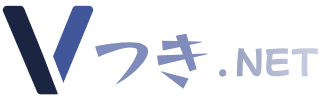
<style>
.page{position:relative;width:320px;height:100px;background:#ffffff}
.page>*{position:absolute;margin:0}
.t1{font:60px "ReggaeOne-Regular";color:#808cbc}
.t2{font:32px "MochiyPopOne-Regular";color:#b0b8cf}
</style>
<div class="page">
<p class="t1" style="left:95px;top:33px;width:113px;height:56px">つき</p>
<p class="t2" style="left:219px;top:48px;width:99px;height:29px">. NET</p>
</div>
